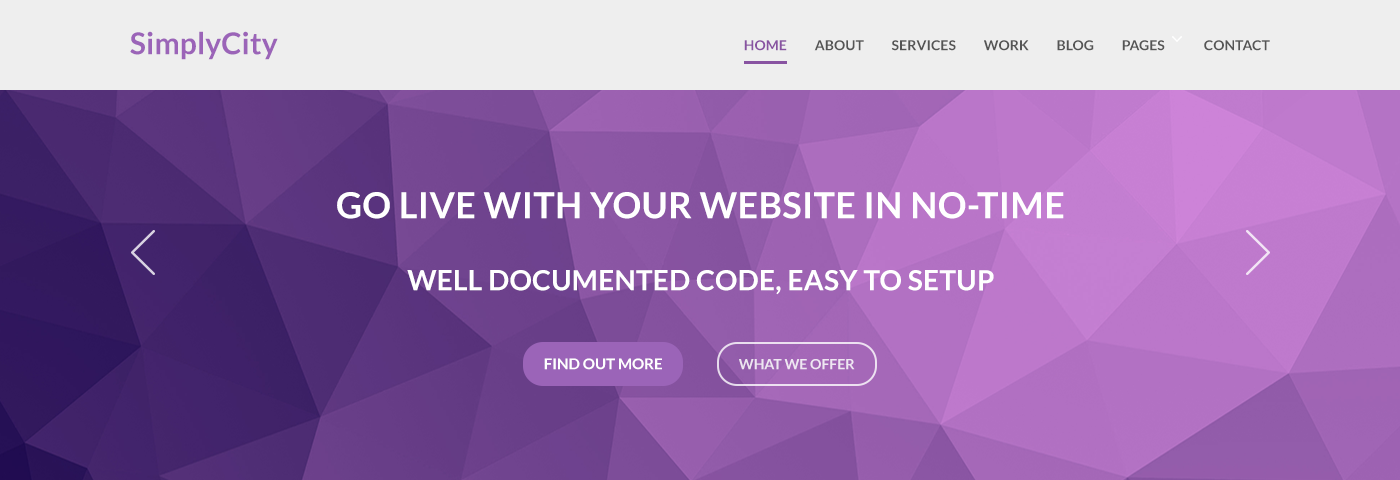
<style>
.page{position:relative;width:1400px;height:480px}
.page>*{position:absolute;margin:0}
.t1{font:30px "Lato-Bold";letter-spacing:0.005em;color:#9b64b8}
.t2{font:14px "Lato-Bold";letter-spacing:0.005em;color:#555555}
.t3{font:14px "Lato-Bold";letter-spacing:0.005em;color:#8853a1}
.t4{font:36px "Lato-Bold";letter-spacing:0.01em;color:#ffffff}
.t5{font:28px "Lato-Bold";letter-spacing:0.01em;color:#ffffff}
.t6{font:15px "Lato-Bold";color:#ffffff}
.t7{font:14px "Lato-Bold";color:#efe6f2}
</style>
<div class="page">
<p class="t1" style="left:130px;top:31px;width:148px;height:29px">SimplyCity</p>
<p class="t2" style="left:744px;top:40px;width:526px;height:11px"><span class="t3">HOME</span>          ABOUT          SERVICES          WORK          BLOG          PAGES              CONTACT</p>
<p class="t4" style="left:337px;top:192px;width:727px;height:27px">GO LIVE WITH YOUR WEBSITE IN NO-TIME</p>
<p class="t5" style="left:407px;top:270px;width:587px;height:25px">WELL DOCUMENTED CODE, EASY TO SETUP</p>
<p class="t6" style="left:544px;top:358px;width:118px;height:12px">FIND OUT MORE</p>
<p class="t7" style="left:739px;top:359px;width:116px;height:11px">WHAT WE OFFER</p>
</div>
